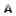
<style>
.page{position:relative;width:16px;height:16px;background:#ffffff}
.page>*{position:absolute;margin:0}
.t1{font:12px "Tahoma-Bold"}
</style>
<div class="page">
<p class="t1" style="left:4px;top:4px;width:8px;height:9px">A</p>
</div>
